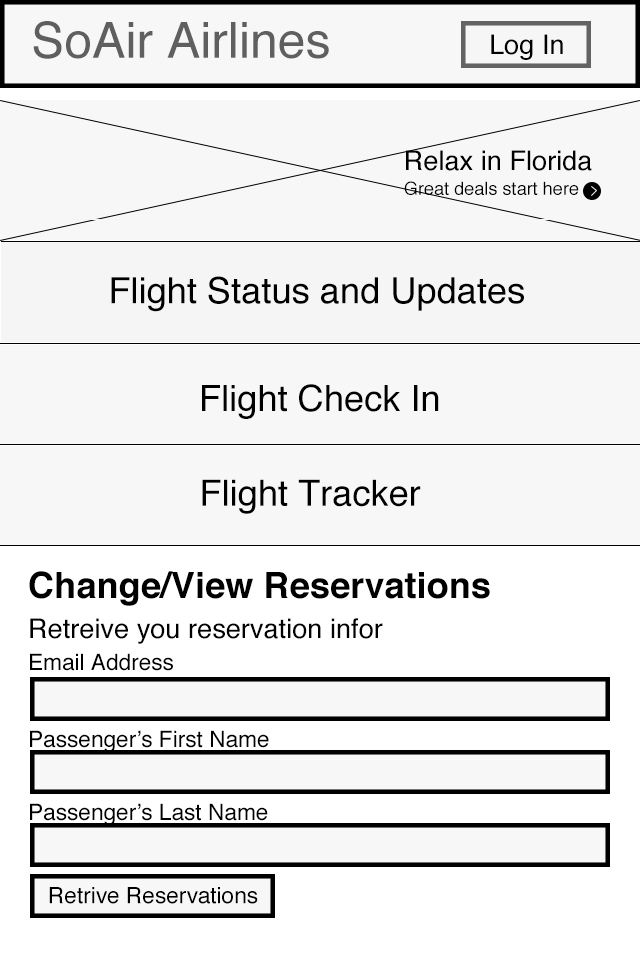
<style>
.page{position:relative;width:640px;height:960px;background:#f7f7f7}
.page>*{position:absolute;margin:0}
.t1{font:49.8px "Helvetica";color:#5f5f5f}
.t2{font:27.2px "Helvetica";color:#000000}
.t3{font:18.1px "Helvetica";color:#000000}
.t4{font:36.2px "Helvetica";color:#000000}
.t5{font:36.2px "Helvetica-Bold";color:#000000}
.t6{font:22.6px "Helvetica";color:#000000}
</style>
<div class="page">
<p class="t1" style="left:33px;top:21px;width:296px;height:38px">SoAir Airlines</p>
<p class="t2" style="left:491px;top:34px;width:72px;height:26px">Log In</p>
<p class="t2" style="left:406px;top:150px;width:186px;height:21px">Relax in Florida</p>
<p class="t3" style="left:404px;top:181px;width:175px;height:14px">Great deals start here</p>
<p class="t4" style="left:111px;top:276px;width:413px;height:36px">Flight Status and Updates</p>
<p class="t4" style="left:202px;top:384px;width:237px;height:35px">Flight Check In</p>
<p class="t4" style="left:202px;top:479px;width:219px;height:35px">Flight Tracker</p>
<p class="t5" style="left:29px;top:571px;width:461px;height:35px">Change/View Reservations</p>
<p class="t2" style="left:30px;top:618px;width:353px;height:26px">Retreive you reservation infor</p>
<p class="t6" style="left:30px;top:653px;width:143px;height:18px">Email Address</p>
<p class="t6" style="left:30px;top:730px;width:239px;height:22px">Passenger’s First Name</p>
<p class="t6" style="left:30px;top:803px;width:238px;height:22px">Passenger’s Last Name</p>
<p class="t6" style="left:49px;top:887px;width:209px;height:17px">Retrive Reservations</p>
</div>
